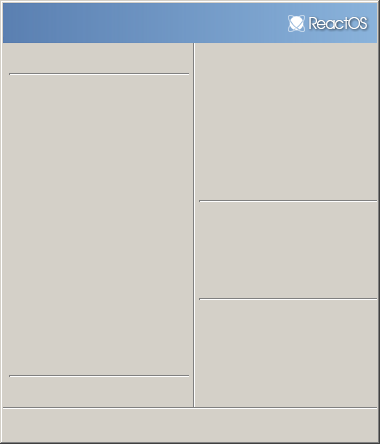
<style>
.page{position:relative;width:380px;height:444px;background:#d4d0c8}
.page>*{position:absolute;margin:0}
.t1{font:15px "Evolventa-Regular";letter-spacing:-0.06em;color:#ffffff}
</style>
<div class="page">
<p class="t1" style="left:309px;top:17px;width:58px;height:12px">ReactOS</p>
</div>
